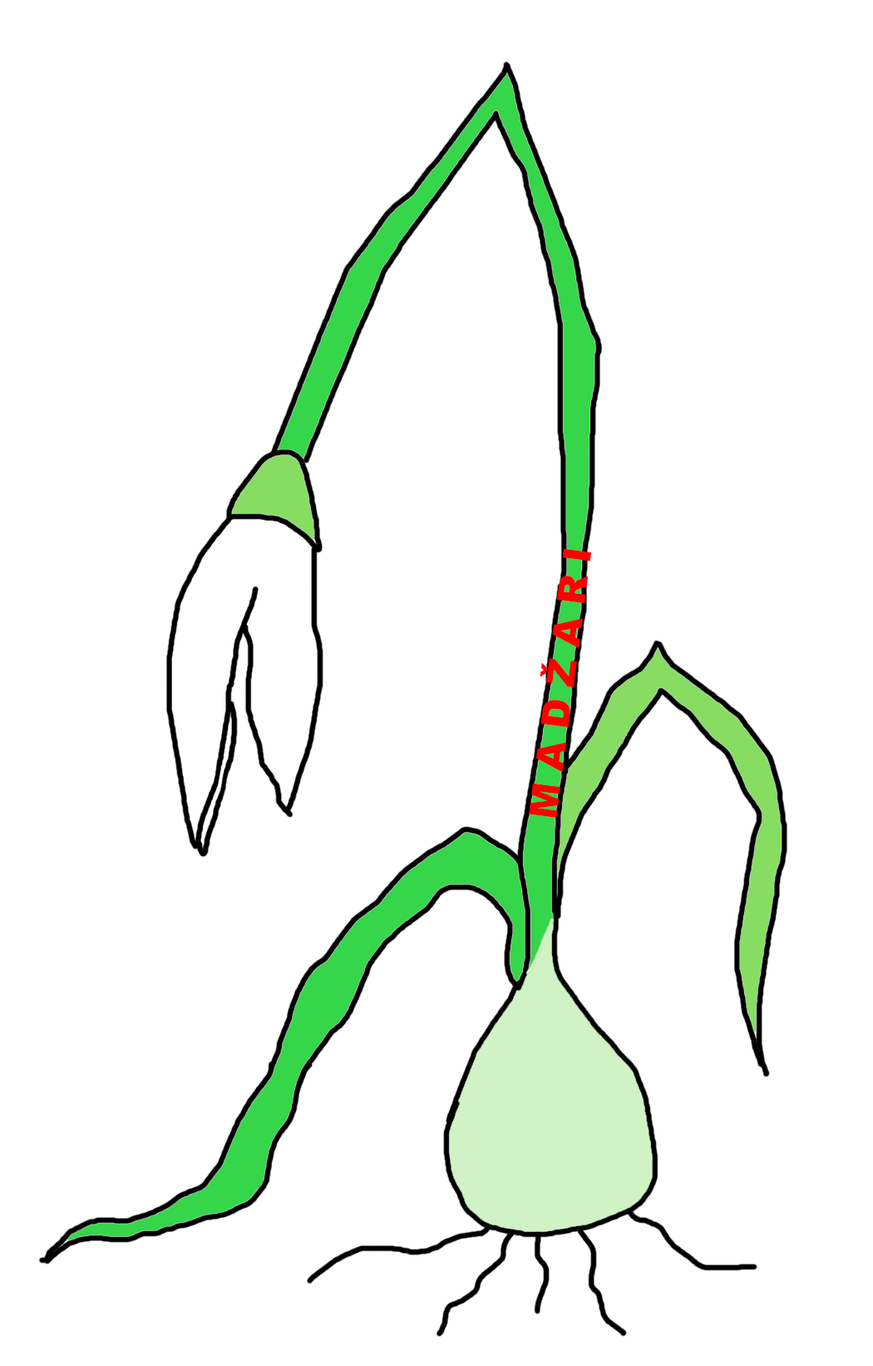
<style>
.page{position:relative;width:873px;height:1366px;background:#ffffff}
.page>*{position:absolute;margin:0}
.t1{font:38.1px "Arial-Black";color:#ff0000}
</style>
<div class="page">
<p class="t1" style="left:529px;top:548px;width:62px;height:270px;rotate:-83deg">M A D Ž A R I</p>
</div>
